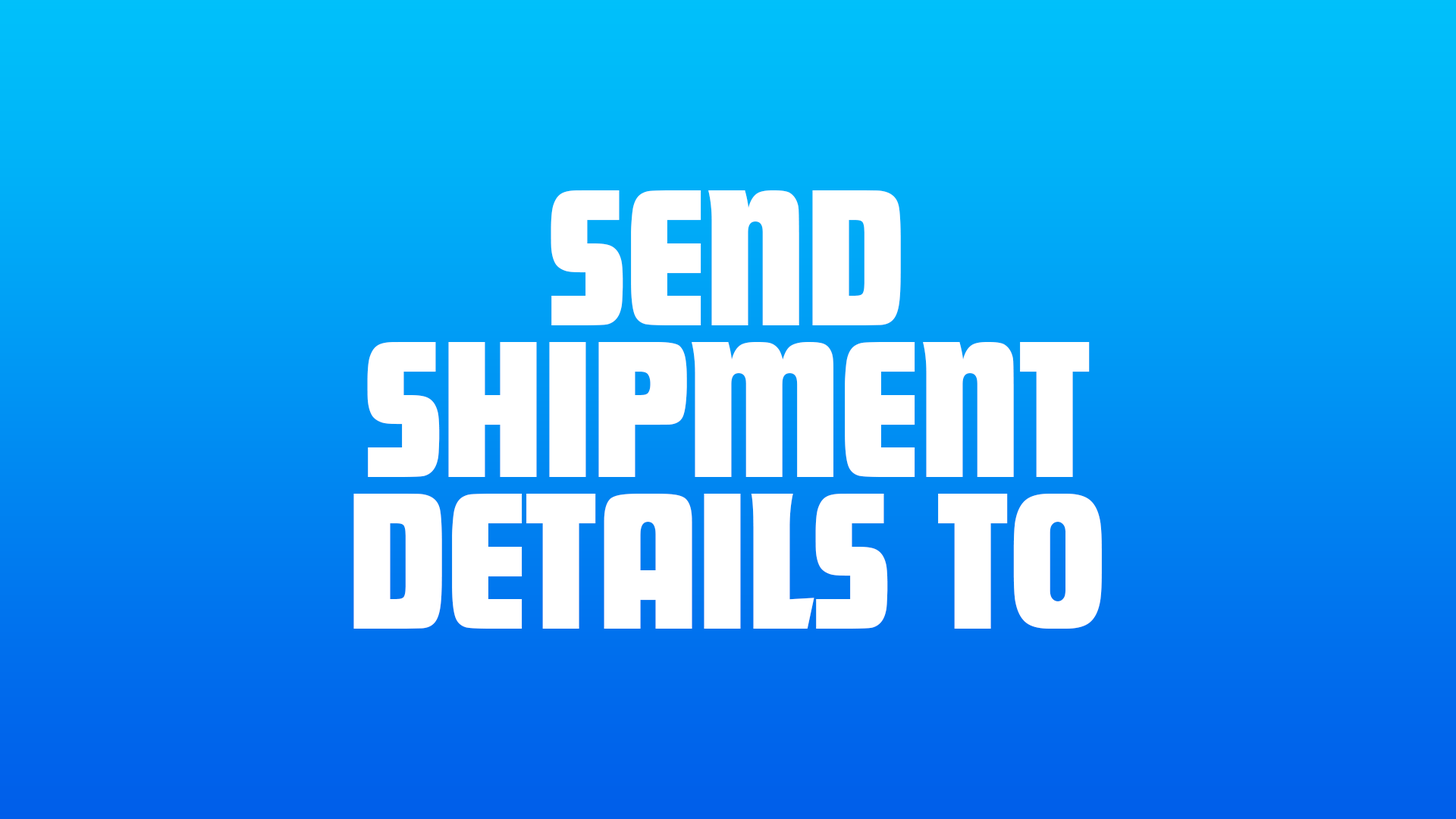
<style>
.page{position:relative;width:1456px;height:819px}
.page>*{position:absolute;margin:0}
.t1{font:202.2px/151.7px "FuturaDisplay";color:#ffffff}
</style>
<div class="page">
<p class="t1" style="left:353px;top:190px;width:749px;height:439px;text-align:center">SEND<br>SHIPMENT<br>DETAILS TO</p>
</div>
